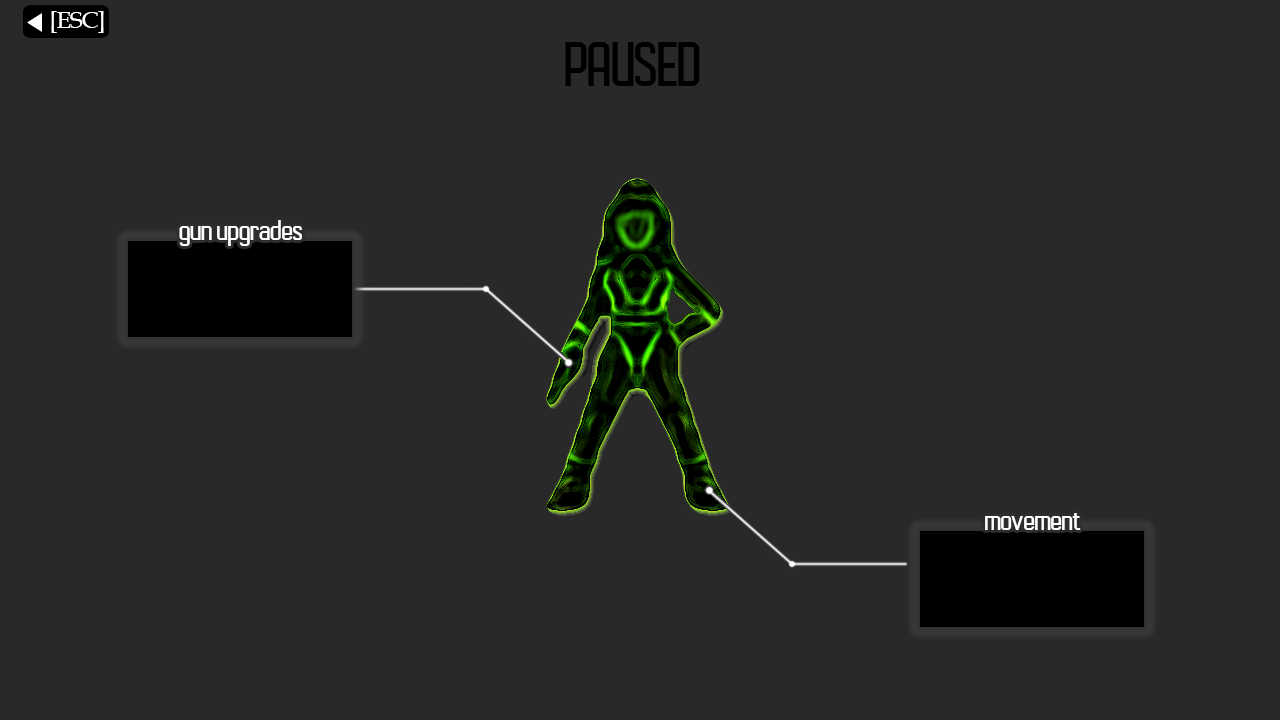
<style>
.page{position:relative;width:1280px;height:720px;background:#292929}
.page>*{position:absolute;margin:0}
.t1{font:22.8px "BookAntiqua";letter-spacing:-0.04em;color:#ffffff;scale:1.05 1}
.t2{font:57px "AutobusBold";letter-spacing:-0.04em;color:#000000;scale:1.05 1}
.t3{font:26.8px "AutobusBold";letter-spacing:-0.04em;color:#ffffff;scale:1.07 1}
</style>
<div class="page">
<p class="t1" style="left:51px;top:11px;width:53px;height:22px">[ESC]</p>
<p class="t2" style="left:565px;top:42px;width:135px;height:44px">PAUSED</p>
<p class="t3" style="left:179px;top:220px;width:123px;height:26px">gun upgrades</p>
<p class="t3" style="left:985px;top:513px;width:96px;height:17px">movement</p>
</div>
